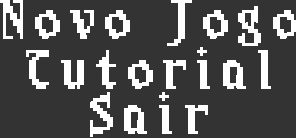
<style>
.page{position:relative;width:296px;height:138px;background:#333333}
.page>*{position:absolute;margin:0}
.t1{font:49px "Sangoku4";letter-spacing:0.18em;color:#ffffff}
</style>
<div class="page">
<p class="t1" style="left:0px;top:0px;width:298px;height:46px">Novo Jogo</p>
<p class="t1" style="left:26px;top:47px;width:245px;height:42px">Tutorial</p>
<p class="t1" style="left:90px;top:92px;width:118px;height:45px">Sair</p>
</div>
